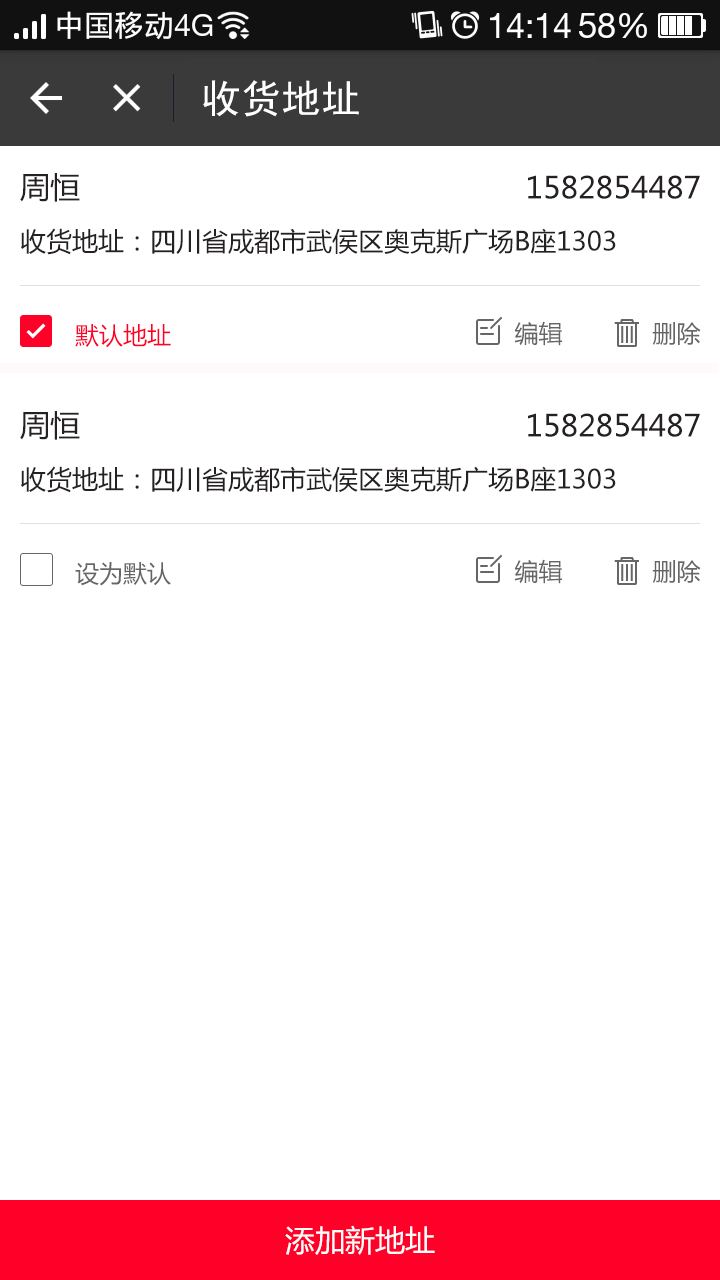
<style>
.page{position:relative;width:720px;height:1280px;background:#ffffff}
.page>*{position:absolute;margin:0}
.t1{font:40px "SimHei";color:#ffffff}
.t2{font:30px "MicrosoftYaHei";color:#242120}
.t3{font:26px "MicrosoftYaHei";color:#242120}
.t4{font:24px "MicrosoftYaHei";color:#ff0029}
.t5{font:24px "MicrosoftYaHei";color:#666666}
.t6{font:30px "MicrosoftYaHei";color:#ffffff}
</style>
<div class="page">
<p class="t1" style="left:203px;top:80px;width:156px;height:37px">收货地址</p>
<p class="t2" style="left:20px;top:173px;width:60px;height:29px">周恒</p>
<p class="t2" style="left:528px;top:175px;width:172px;height:24px">1582854487</p>
<p class="t3" style="left:21px;top:228px;width:595px;height:27px">收货地址：四川省成都市武侯区奥克斯广场B座1303</p>
<p class="t4" style="left:75px;top:324px;width:96px;height:24px">默认地址</p>
<p class="t5" style="left:514px;top:321px;width:49px;height:25px">编辑</p>
<p class="t5" style="left:652px;top:322px;width:49px;height:23px">删除</p>
<p class="t2" style="left:20px;top:411px;width:60px;height:29px">周恒</p>
<p class="t2" style="left:528px;top:413px;width:172px;height:24px">1582854487</p>
<p class="t3" style="left:21px;top:466px;width:595px;height:27px">收货地址：四川省成都市武侯区奥克斯广场B座1303</p>
<p class="t5" style="left:75px;top:562px;width:96px;height:24px">设为默认</p>
<p class="t5" style="left:514px;top:559px;width:49px;height:25px">编辑</p>
<p class="t5" style="left:652px;top:560px;width:49px;height:23px">删除</p>
<p class="t6" style="left:285px;top:1225px;width:150px;height:30px">添加新地址</p>
</div>
